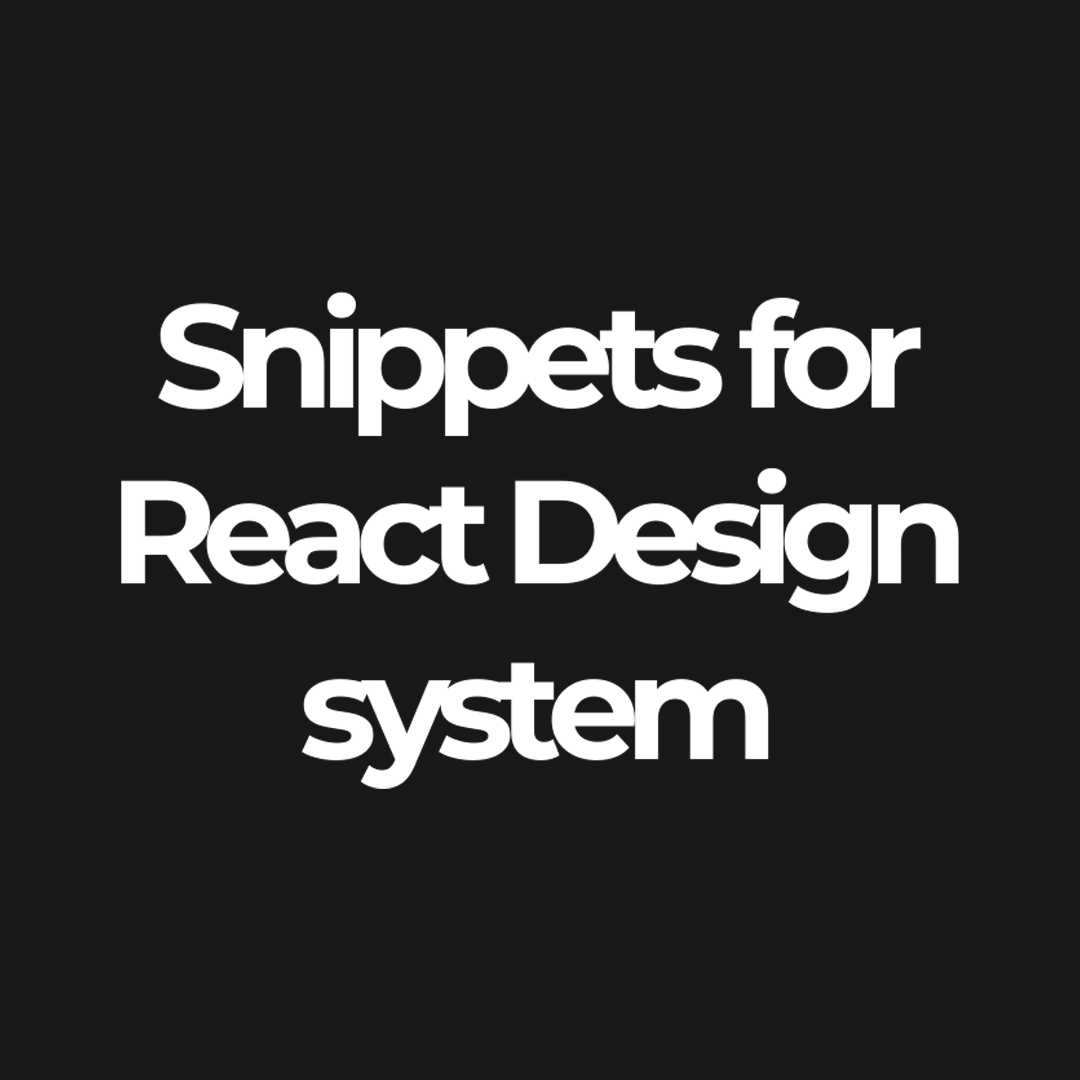
<style>
.page{position:relative;width:1080px;height:1080px;background:#181818}
.page>*{position:absolute;margin:0}
.t1{font:146.3px "Montserrat-Bold";letter-spacing:-0.1em;color:#ffffff}
</style>
<div class="page">
<p class="t1" style="left:121px;top:291px;width:838px;height:498px;text-align:center">Snippets for<br>React Design<br>system</p>
</div>
